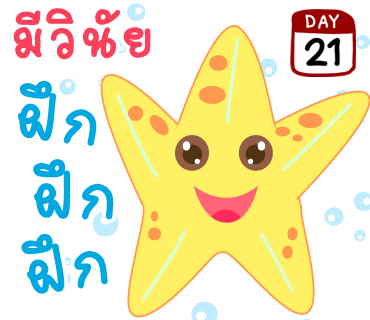
<style>
.page{position:relative;width:370px;height:320px;background:#ffffff}
.page>*{position:absolute;margin:0}
.t1{font:84px "2005_iannnnnMTV";letter-spacing:0.025em;color:#fa405a;scale:1.06 1}
.t2{font:100px "2005_iannnnnMTV";letter-spacing:0.025em;color:#00a8e1;scale:1.06 1}
</style>
<div class="page">
<p class="t1" style="left:13px;top:8px;width:138px;height:52px">มีวินัย</p>
<p class="t2" style="left:18px;top:80px;width:79px;height:66px;rotate:6deg">ฝึก</p>
<p class="t2" style="left:33px;top:159px;width:81px;height:61px">ฝึก</p>
<p class="t2" style="left:21px;top:234px;width:87px;height:60px;rotate:-10deg">ฝึก</p>
</div>
